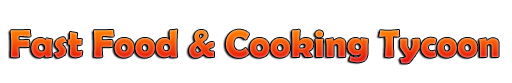
<style>
.page{position:relative;width:512px;height:83px;background:#ffffff}
.page>*{position:absolute;margin:0}
.t1{font:39px "BerlinSansFBDemi-Bold"}
</style>
<div class="page">
<p class="t1" style="left:10px;top:29px;width:489px;height:35px">Fast Food &amp; Cooking Tycoon</p>
</div>
